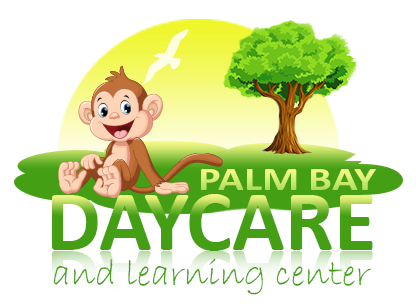
<style>
.page{position:relative;width:416px;height:306px;background:#ffffff}
.page>*{position:absolute;margin:0}
.t1{font:33.2px "Calibri-Bold";scale:1.28 1}
.t2{font:87px "Calibri-Bold";color:#449f14}
.t3{font:38.2px "BradleyHandITC";color:#449f14}
</style>
<div class="page">
<p class="t1" style="left:201px;top:169px;width:175px;height:21px">PALM BAY</p>
<p class="t2" style="left:52px;top:194px;width:321px;height:57px">DAYCARE</p>
<p class="t3" style="left:53px;top:258px;width:319px;height:37px">and learning center</p>
</div>
